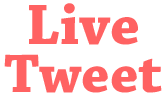
<style>
.page{position:relative;width:167px;height:98px;background:#ffffff}
.page>*{position:absolute;margin:0}
.t1{font:60px "ChaparralPro-Bold";color:#ff6262}
.t2{font:57.1px "ChaparralPro-Bold";color:#ff6262}
</style>
<div class="page">
<p class="t1" style="left:29px;top:3px;width:109px;height:42px">Live</p>
<p class="t2" style="left:4px;top:54px;width:158px;height:39px">Tweet</p>
</div>
